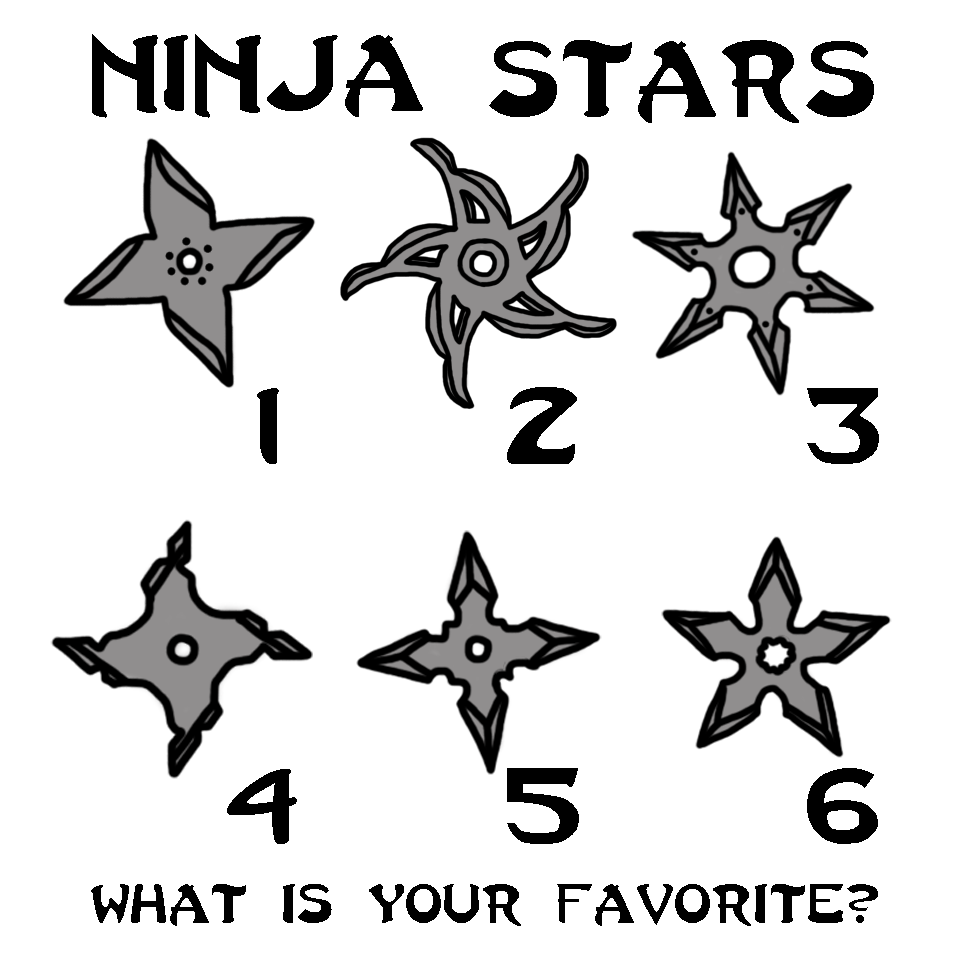
<style>
.page{position:relative;width:960px;height:960px;background:#ffffff}
.page>*{position:absolute;margin:0}
.t1{font:83.3px "LastNinja";color:#000000}
.t2{font:41.7px "LastNinja";color:#000000}
</style>
<div class="page">
<p class="t1" style="left:92px;top:34px;width:331px;height:84px">Ninja</p>
<p class="t1" style="left:489px;top:40px;width:385px;height:83px">Stars</p>
<p class="t1" style="left:257px;top:388px;width:22px;height:76px">1</p>
<p class="t1" style="left:507px;top:387px;width:70px;height:77px">2</p>
<p class="t1" style="left:807px;top:388px;width:72px;height:76px">3</p>
<p class="t1" style="left:227px;top:769px;width:70px;height:75px">4</p>
<p class="t1" style="left:507px;top:768px;width:72px;height:76px">5</p>
<p class="t1" style="left:807px;top:768px;width:71px;height:76px">6</p>
<p class="t2" style="left:91px;top:884px;width:787px;height:42px">What is your favorite?</p>
</div>
